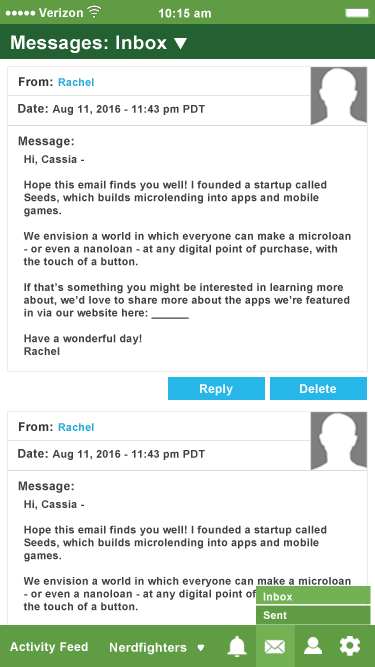
<style>
.page{position:relative;width:375px;height:667px;background:#ffffff}
.page>*{position:absolute;margin:0}
.t1{font:12px "Arial-BoldMT";letter-spacing:0.025em;color:#ffffff}
.t2{font:18.7px "Arial-BoldMT";letter-spacing:0.025em;color:#ffffff}
.t3{font:12px "Arial-BoldMT";letter-spacing:0.025em;color:#333333}
.t4{font:10.7px "Arial-BoldMT";letter-spacing:0.025em;color:#22a9d8}
.t5{font:10.7px "Arial-BoldMT";letter-spacing:0.025em;color:#404040}
.t6{font:12px "Arial-BoldMT";letter-spacing:0.025em;color:#404040}
.t7{font:10.7px "Arial-BoldMT";letter-spacing:0.025em;color:#ffffff}
.t8{font:12.5px "Arial-BoldMT";letter-spacing:0.025em;color:#ffffff}
</style>
<div class="page">
<p class="t1" style="left:39px;top:8px;width:44px;height:9px">Verizon</p>
<p class="t1" style="left:159px;top:8px;width:52px;height:10px">10:15 am</p>
<p class="t2" style="left:11px;top:35px;width:156px;height:18px">Messages: Inbox</p>
<p class="t3" style="left:19px;top:77px;width:34px;height:9px">From:</p>
<p class="t4" style="left:58px;top:78px;width:36px;height:8px">Rachel</p>
<p class="t5" style="left:18px;top:104px;width:187px;height:11px"><span class="t6">Date: </span>Aug 11, 2016 - 11:43 pm PDT</p>
<p class="t6" style="left:18px;top:136px;width:56px;height:12px">Message:</p>
<p class="t5" style="left:23px;top:155px;width:328px;height:200px">Hi, Cassia - <br><br>Hope this email finds you well! I founded a startup called Seeds, which builds microlending into apps and mobile games. <br><br>We envision a world in which everyone can make a microloan - or even a nanoloan - at any digital point of purchase, with the touch of a button. <br><br>If that’s something you might be interested in learning more about, we’d love to share more about the apps we’re featured in via our website here: ______<br><br>Have a wonderful day!<br>Rachel</p>
<p class="t1" style="left:200px;top:384px;width:33px;height:12px">Reply</p>
<p class="t1" style="left:300px;top:384px;width:36px;height:9px">Delete</p>
<p class="t3" style="left:19px;top:422px;width:34px;height:9px">From:</p>
<p class="t4" style="left:58px;top:423px;width:36px;height:8px">Rachel</p>
<p class="t5" style="left:18px;top:449px;width:187px;height:11px"><span class="t6">Date: </span>Aug 11, 2016 - 11:43 pm PDT</p>
<p class="t6" style="left:18px;top:481px;width:56px;height:12px">Message:</p>
<p class="t7" style="left:263px;top:592px;width:30px;height:9px">Inbox</p>
<p class="t7" style="left:263px;top:611px;width:24px;height:8px">Sent</p>
<p class="t1" style="left:10px;top:642px;width:78px;height:12px">Activity Feed</p>
<p class="t8" style="left:110px;top:642px;width:77px;height:13px">Nerdfighters</p>
</div>
